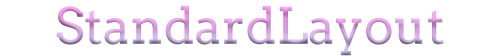
<style>
.page{position:relative;width:500px;height:56px;background:#ffffff}
.page>*{position:absolute;margin:0}
.t1{font:50px "Arvo"}
</style>
<div class="page">
<p class="t1" style="left:56px;top:5px;width:388px;height:51px">StandardLayout</p>
</div>
